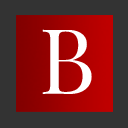
<style>
.page{position:relative;width:128px;height:128px;background:#333333}
.page>*{position:absolute;margin:0}
.t1{font:90.7px "PlayfairDisplaySC-Regular";letter-spacing:-0.02em;color:#ffffff;text-transform:uppercase}
</style>
<div class="page">
<p class="t1" style="left:42px;top:29px;width:50px;height:65px">B</p>
</div>
